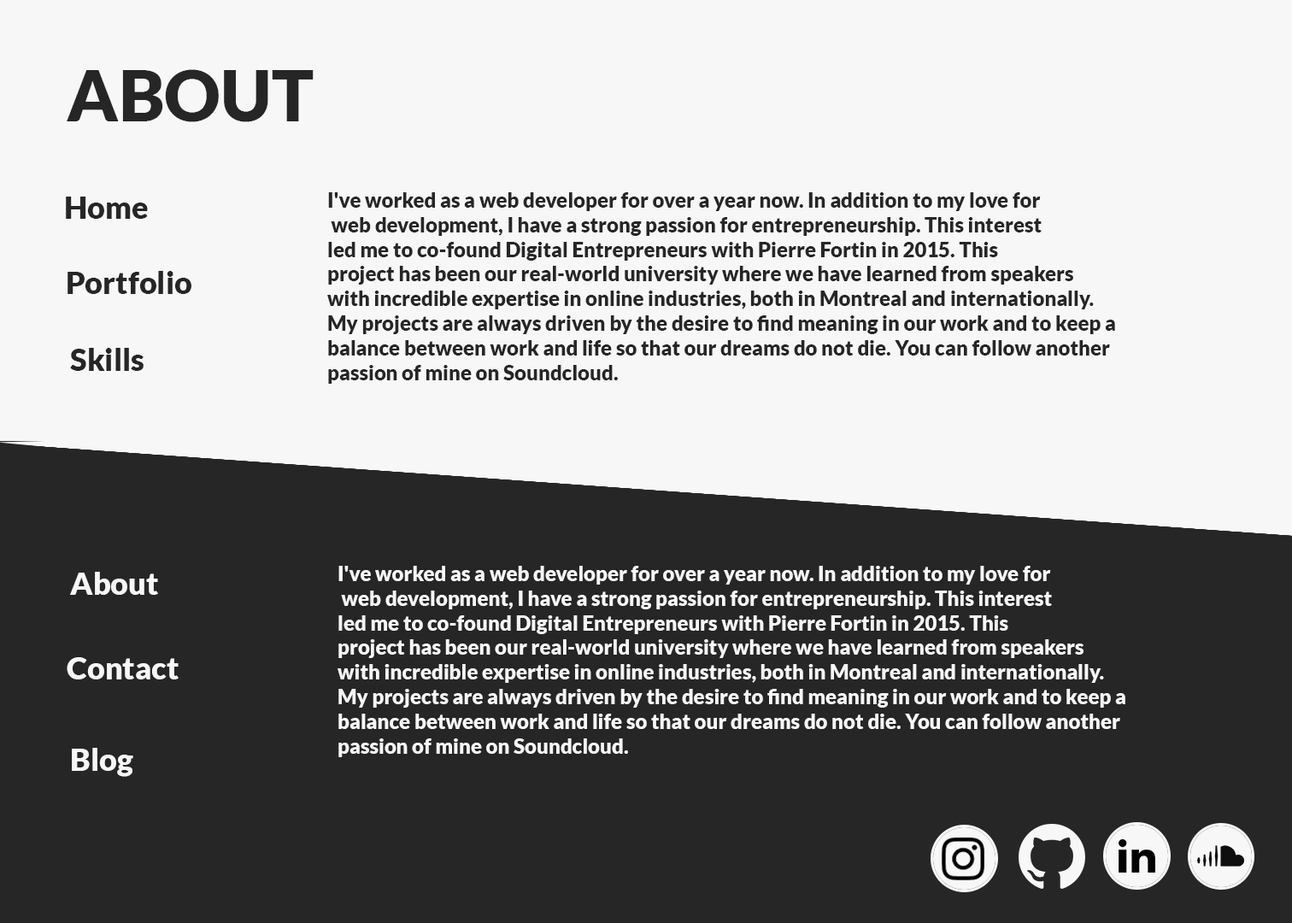
<style>
.page{position:relative;width:1292px;height:923px;background:#f7f7f7}
.page>*{position:absolute;margin:0}
.t1{font:70.5px "Lato-Black";color:#272626}
.t2{font:30.8px "Lato-Black";color:#272626}
.t3{font:20.5px "Lato-Black";color:#272626}
.t4{font:20.5px "Lato-Black";color:#f7f7f7}
.t5{font:30.8px "Lato-Black";color:#f7f7f7}
</style>
<div class="page">
<p class="t1" style="left:67px;top:69px;width:247px;height:53px">ABOUT</p>
<p class="t2" style="left:66px;top:197px;width:82px;height:22px">Home</p>
<p class="t3" style="left:327px;top:192px;width:788px;height:192px">I've worked as a web developer for over a year now. In addition to my love for<br> web development, I have a strong passion for entrepreneurship. This interest<br>led me to co-found Digital Entrepreneurs with Pierre Fortin in 2015. This<br>project has been our real-world university where we have learned from speakers<br>with incredible expertise in online industries, both in Montreal and internationally. <br>My projects are always driven by the desire to find meaning in our work and to keep a <br>balance between work and life so that our dreams do not die. You can follow another <br>passion of mine on Soundcloud.</p>
<p class="t2" style="left:68px;top:271px;width:123px;height:23px">Portfolio</p>
<p class="t2" style="left:70px;top:348px;width:74px;height:23px">Skills</p>
<p class="t4" style="left:338px;top:566px;width:787px;height:191px">I've worked as a web developer for over a year now. In addition to my love for<br> web development, I have a strong passion for entrepreneurship. This interest<br>led me to co-found Digital Entrepreneurs with Pierre Fortin in 2015. This<br>project has been our real-world university where we have learned from speakers<br>with incredible expertise in online industries, both in Montreal and internationally. <br>My projects are always driven by the desire to find meaning in our work and to keep a <br>balance between work and life so that our dreams do not die. You can follow another <br>passion of mine on Soundcloud.</p>
<p class="t5" style="left:70px;top:572px;width:88px;height:23px">About</p>
<p class="t5" style="left:67px;top:657px;width:112px;height:22px">Contact</p>
<p class="t5" style="left:72px;top:748px;width:61px;height:29px">Blog</p>
</div>
